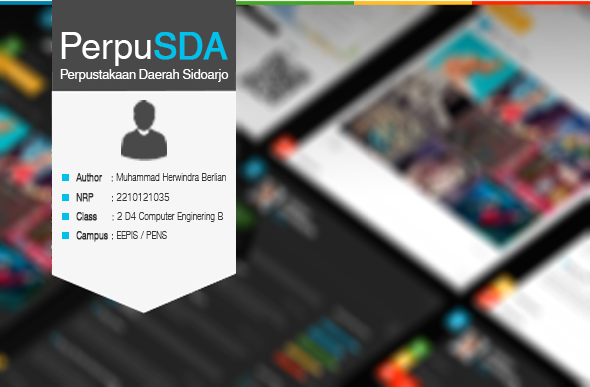
<style>
.page{position:relative;width:590px;height:387px}
.page>*{position:absolute;margin:0}
.t1{font:11px "HelveticaNeueLTCom-ThCn";color:#363535}
.t2{font:11px "HelveticaNeueLTCom-ThCn";color:#363535;font-weight:bold}
</style>
<div class="page">
<p class="t1" style="left:76px;top:173px;width:150px;height:9px"><span class="t2">Author   :</span> Muhammad Herwindra Berlian</p>
<p class="t2" style="left:76px;top:193px;width:94px;height:9px">NRP      :<span class="t1"> 2210121035</span></p>
<p class="t1" style="left:76px;top:212px;width:147px;height:10px"><span class="t2">Class     :</span> 2 D4 Computer Enginering B</p>
<p class="t1" style="left:76px;top:231px;width:91px;height:11px"><span class="t2">Campus :</span> EEPIS / PENS</p>
</div>
